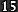
<style>
.page{position:relative;width:18px;height:12px;background:#333333}
.page>*{position:absolute;margin:0}
.t1{font:17px "Perpetua-Bold";color:#ffffff}
</style>
<div class="page">
<p class="t1" style="left:2px;top:1px;width:14px;height:10px">15</p>
</div>
